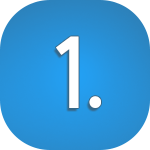
<style>
.page{position:relative;width:150px;height:150px}
.page>*{position:absolute;margin:0}
.t1{font:100px "Biko";color:#ffffff}
</style>
<div class="page">
<p class="t1" style="left:56px;top:36px;width:45px;height:72px">1.</p>
</div>
